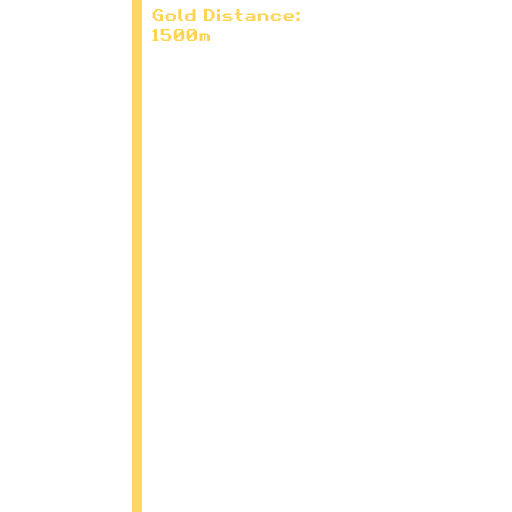
<style>
.page{position:relative;width:512px;height:512px;background:#ffffff}
.page>*{position:absolute;margin:0}
.t1{font:16.7px "RetroGaming";color:#ffd452}
</style>
<div class="page">
<p class="t1" style="left:152px;top:9px;width:148px;height:32px">Gold Distance:<br>1500m</p>
</div>
